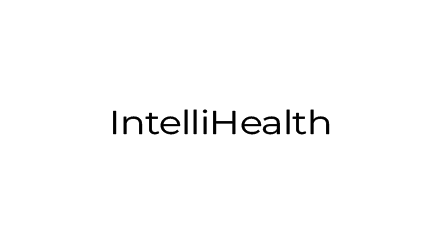
<style>
.page{position:relative;width:441px;height:248px;background:#ffffff}
.page>*{position:absolute;margin:0}
.t1{font:32.8px "MontserratRoman-Regular";color:#000000;font-weight:bold;scale:1.14 1}
</style>
<div class="page">
<p class="t1" style="left:113px;top:109px;width:217px;height:26px">IntelliHealth</p>
</div>
